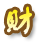
<style>
.page{position:relative;width:42px;height:42px;background:#ffffff}
.page>*{position:absolute;margin:0}
.t1{font:36px "FZSTK--GBK1-0";font-weight:bold}
</style>
<div class="page">
<p class="t1" style="left:6px;top:6px;width:26px;height:29px">財</p>
</div>
